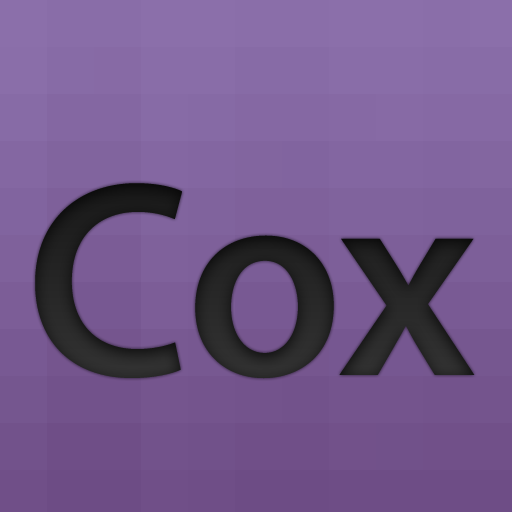
<style>
.page{position:relative;width:512px;height:512px}
.page>*{position:absolute;margin:0}
.t1{font:280px "MyriadPro-Semibold";color:#232323}
</style>
<div class="page">
<p class="t1" style="left:35px;top:183px;width:440px;height:196px">Cox</p>
</div>
